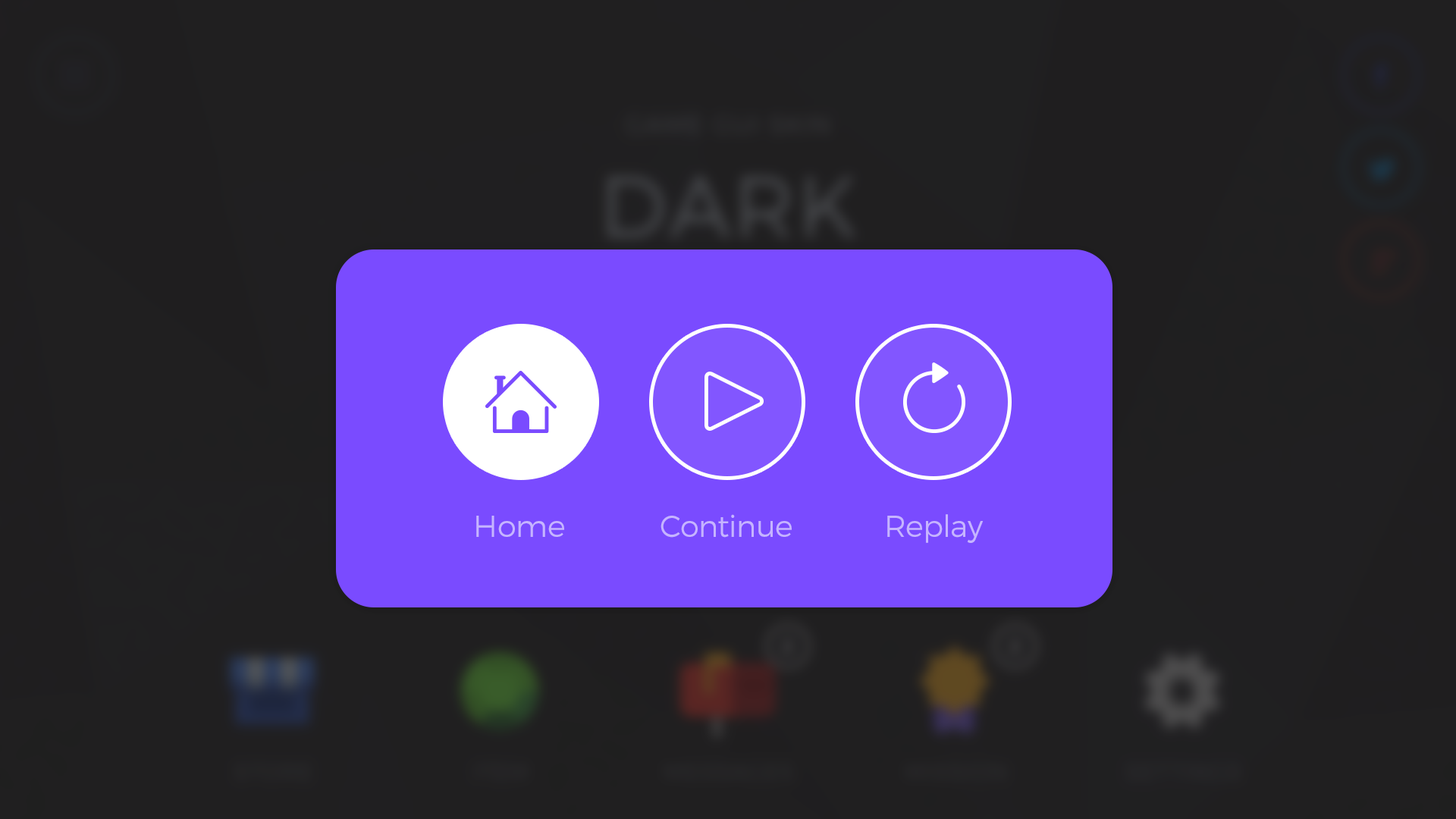
<style>
.page{position:relative;width:1456px;height:819px;background:#201f20}
.page>*{position:absolute;margin:0}
.t1{font:30.3px "Montserrat-Light";color:#c6b4ff}
</style>
<div class="page">
<p class="t1" style="left:476px;top:516px;width:88px;height:21px">Home</p>
<p class="t1" style="left:660px;top:514px;width:132px;height:24px">Continue</p>
<p class="t1" style="left:887px;top:514px;width:97px;height:29px">Replay</p>
</div>
